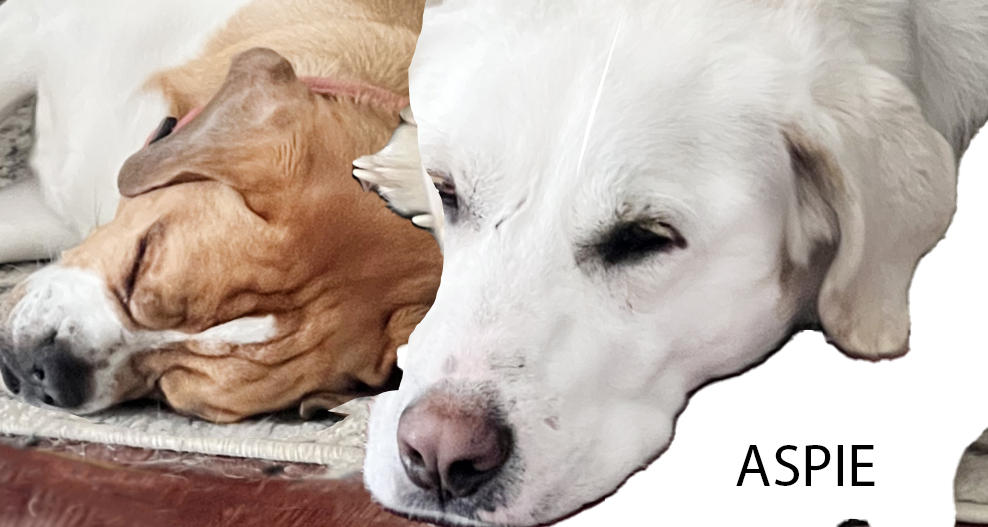
<style>
.page{position:relative;width:988px;height:527px}
.page>*{position:absolute;margin:0}
.t1{font:60px "MyriadPro-Regular";color:#000000}
</style>
<div class="page">
<p class="t1" style="left:736px;top:445px;width:139px;height:41px">ASPIE</p>
</div>
